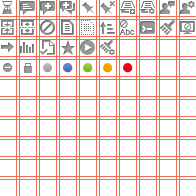
<style>
.page{position:relative;width:196px;height:196px;background:#ffffff}
.page>*{position:absolute;margin:0}
.t1{font:8px "HelveticaNeueLTStd-Roman";color:#7c7c7c}
</style>
<div class="page">
<p class="t1" style="left:120px;top:29px;width:15px;height:6px">Abc</p>
</div>
